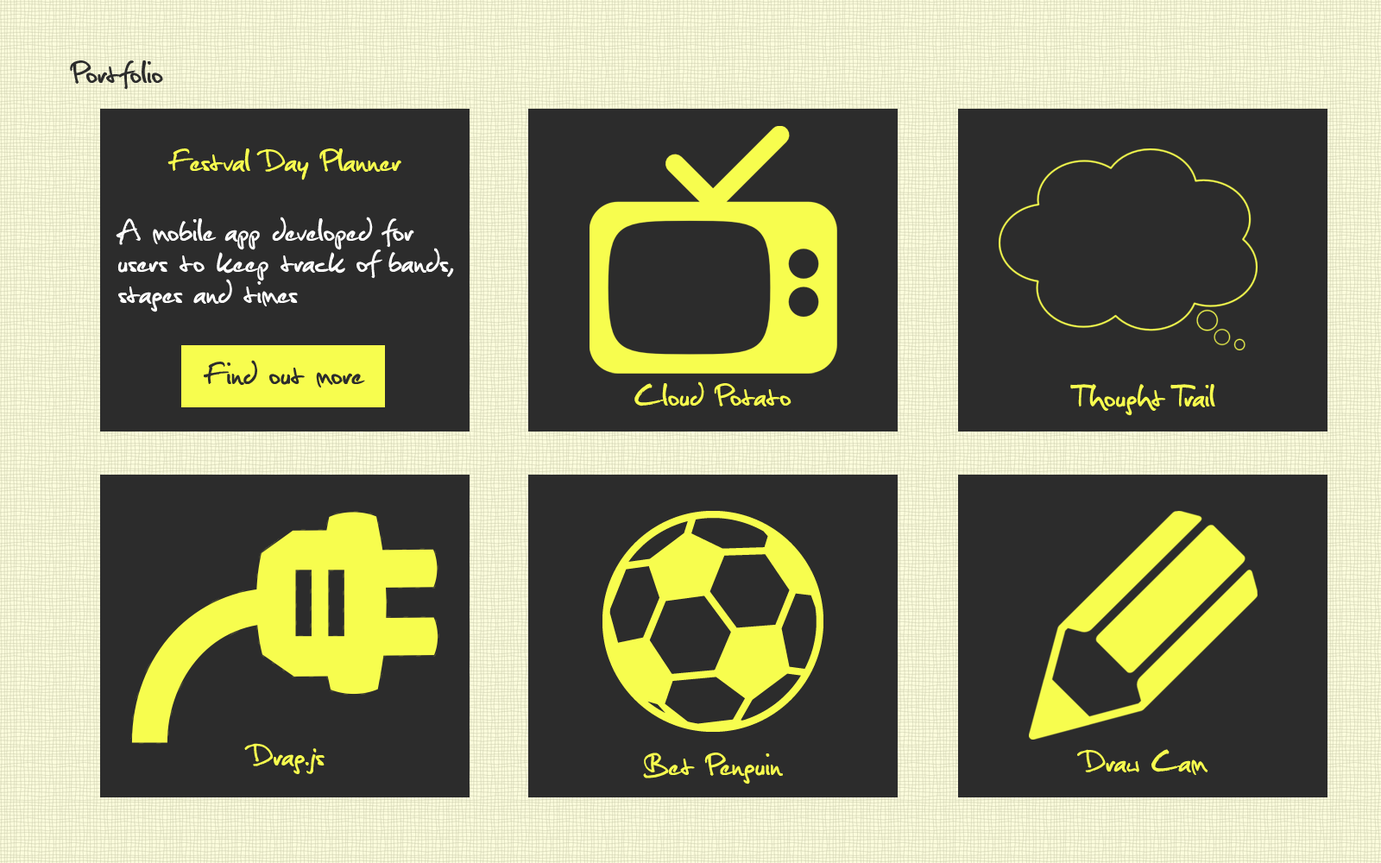
<style>
.page{position:relative;width:1381px;height:863px;background:#2c2c2c}
.page>*{position:absolute;margin:0}
.t1{font:41.4px "Christopherhand";letter-spacing:0.01em;color:#2c2c2c}
.t2{font:41.4px "Christopherhand";letter-spacing:0.01em;color:#f7fd4e}
.t3{font:41.4px/31.1px "Christopherhand";letter-spacing:0.01em;color:#ffffff}
</style>
<div class="page">
<p class="t1" style="left:70px;top:60px;width:93px;height:30px">Portfolio</p>
<p class="t2" style="left:167px;top:148px;width:234px;height:32px">Festval Day Planner</p>
<p class="t3" style="left:116px;top:217px;width:338px;height:96px">A mobile app developed for <br>users to keep track of bands,<br>stages and times</p>
<p class="t1" style="left:204px;top:360px;width:161px;height:28px">Find out more</p>
<p class="t2" style="left:635px;top:382px;width:157px;height:25px">Cloud Potato</p>
<p class="t2" style="left:1070px;top:384px;width:146px;height:32px">Thought Trail</p>
<p class="t2" style="left:244px;top:743px;width:81px;height:31px">Drag.js</p>
<p class="t2" style="left:1077px;top:749px;width:132px;height:26px">Draw Cam</p>
<p class="t2" style="left:643px;top:753px;width:140px;height:32px">Bet Penguin</p>
</div>
